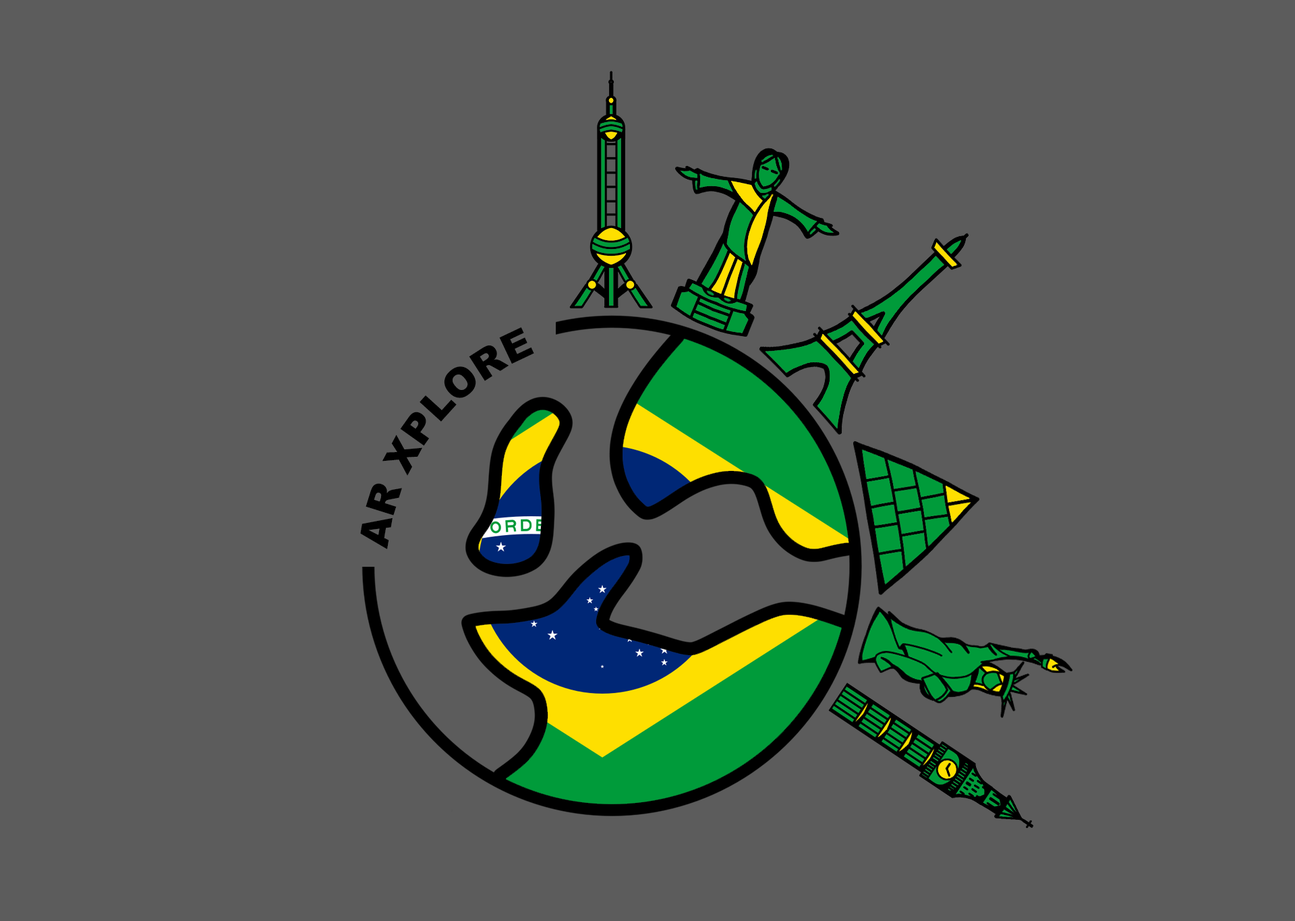
<style>
.page{position:relative;width:1295px;height:921px;background:#5c5c5c}
.page>*{position:absolute;margin:0}
.t1{font:40.5px "Arial-Black";color:#000000}
</style>
<div class="page">
<p class="t1" style="left:360px;top:327px;width:174px;height:222px;rotate:-13deg">AR XPLORE</p>
</div>
